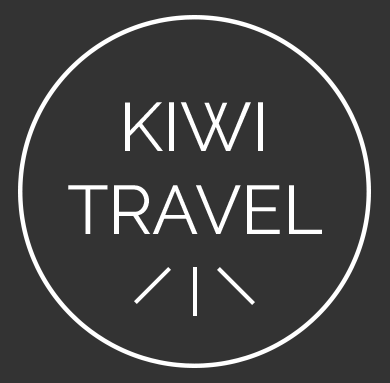
<style>
.page{position:relative;width:390px;height:383px;background:#333333}
.page>*{position:absolute;margin:0}
.t1{font:68.6px "Raleway-Regular";color:#ffffff}
</style>
<div class="page">
<p class="t1" style="left:68px;top:102px;width:254px;height:132px;text-align:center">KIWI<br>TRAVEL</p>
</div>
